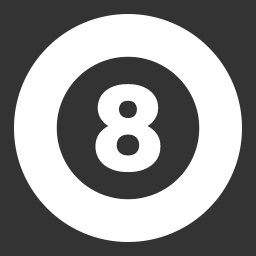
<style>
.page{position:relative;width:256px;height:256px;background:#333333}
.page>*{position:absolute;margin:0}
.t1{font:118.5px "BreezeSans-Bold";color:#ffffff;font-weight:bold;scale:1.05 1}
</style>
<div class="page">
<p class="t1" style="left:95px;top:84px;width:66px;height:88px">8</p>
</div>
